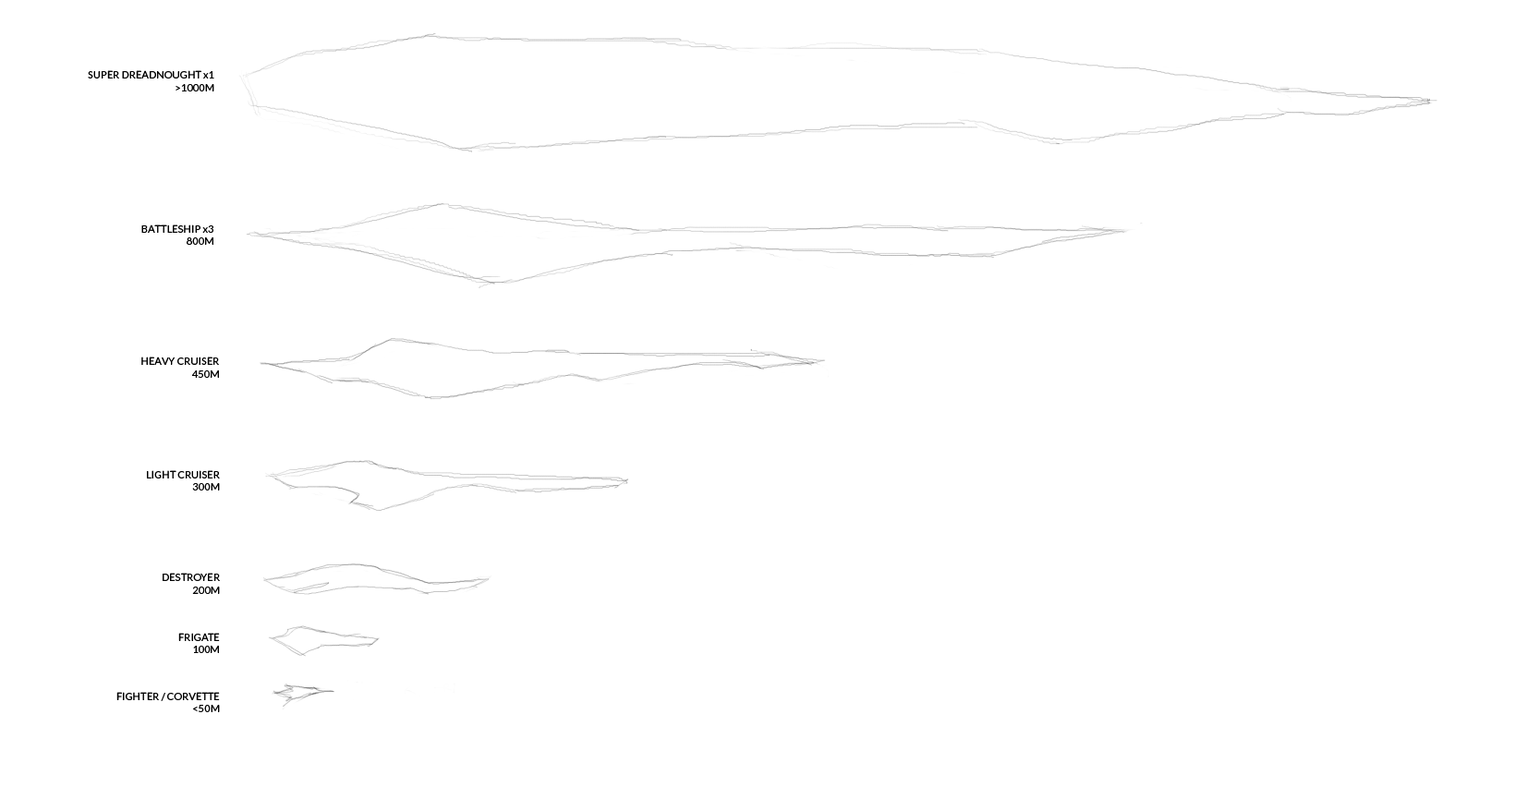
<style>
.page{position:relative;width:1515px;height:787px;background:#ffffff}
.page>*{position:absolute;margin:0}
.t1{font:10.3px "Lato-Regular";color:#000000}
</style>
<div class="page">
<p class="t1" style="left:88px;top:70px;width:126px;height:21px;text-align:right">SUPER DREADNOUGHT x1<br>&gt;1000M</p>
<p class="t1" style="left:141px;top:224px;width:72px;height:21px;text-align:right">BATTLESHIP x3<br>800M</p>
<p class="t1" style="left:141px;top:357px;width:78px;height:21px;text-align:right">HEAVY CRUISER<br>450M</p>
<p class="t1" style="left:147px;top:470px;width:73px;height:21px;text-align:right">LIGHT CRUISER<br>300M</p>
<p class="t1" style="left:163px;top:573px;width:57px;height:21px;text-align:right">DESTROYER<br>200M</p>
<p class="t1" style="left:178px;top:633px;width:42px;height:20px;text-align:right">FRIGATE<br>100M</p>
<p class="t1" style="left:116px;top:692px;width:104px;height:20px;text-align:right">FIGHTER / CORVETTE<br>&lt;50M</p>
</div>
